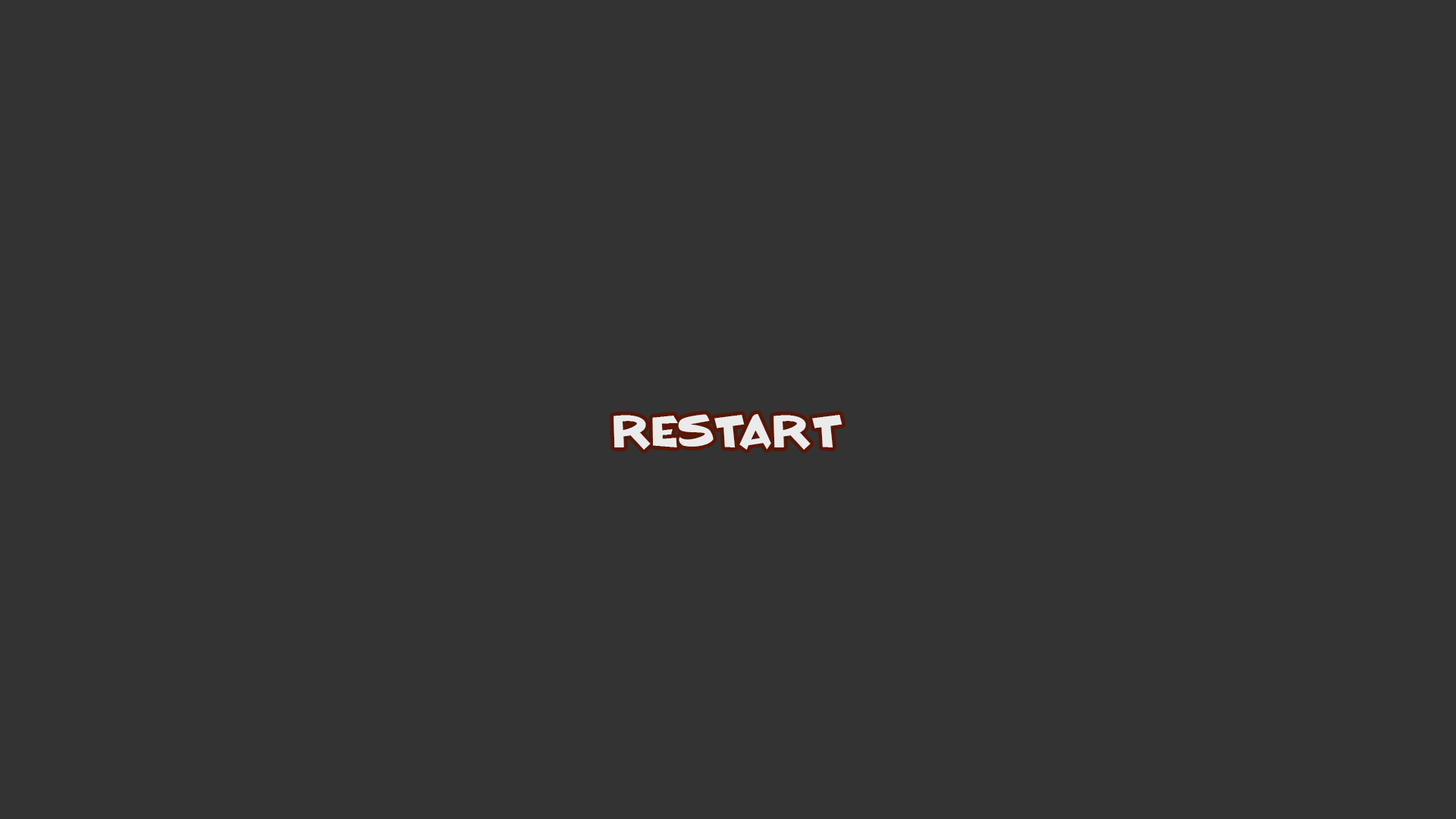
<style>
.page{position:relative;width:1456px;height:819px;background:#333333}
.page>*{position:absolute;margin:0}
.t1{font:50.6px "BLOCKHEADDUDEPersonalUse";color:#ffffff}
</style>
<div class="page">
<p class="t1" style="left:613px;top:414px;width:229px;height:36px;opacity:0.9">RESTART</p>
</div>
